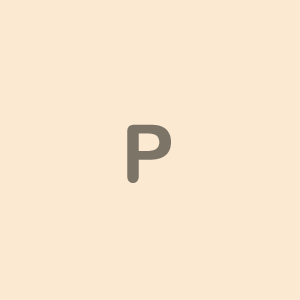
<style>
.page{position:relative;width:300px;height:300px;background:#fbe9d1}
.page>*{position:absolute;margin:0}
.t1{font:80px "ArialRoundedMTBold";color:#7d7468}
</style>
<div class="page">
<p class="t1" style="left:127px;top:124px;width:44px;height:59px">P</p>
</div>
